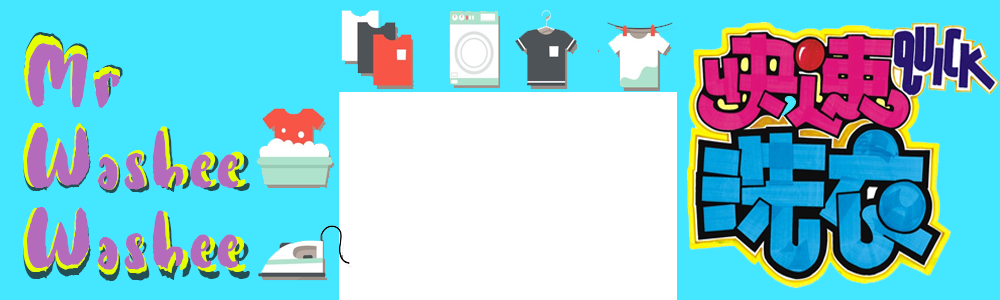
<style>
.page{position:relative;width:1000px;height:300px;background:#44e7ff}
.page>*{position:absolute;margin:0}
.t1{font:98.6px/87.7px "HotCakes";letter-spacing:0.05em}
.t2{font:94.7px/84.2px "HotCakes";letter-spacing:0.05em}
.t3{font:90px/80px "HotCakes";letter-spacing:0.05em;color:#b56bbc}
</style>
<div class="page">
<p class="t1" style="left:23px;top:32px;width:227px;height:249px">Mr <br>Washee <br>Washee</p>
<p class="t2" style="left:23px;top:34px;width:223px;height:241px">Mr <br>Washee <br>Washee</p>
<p class="t3" style="left:27px;top:43px;width:212px;height:227px">Mr <br>Washee <br>Washee</p>
</div>
